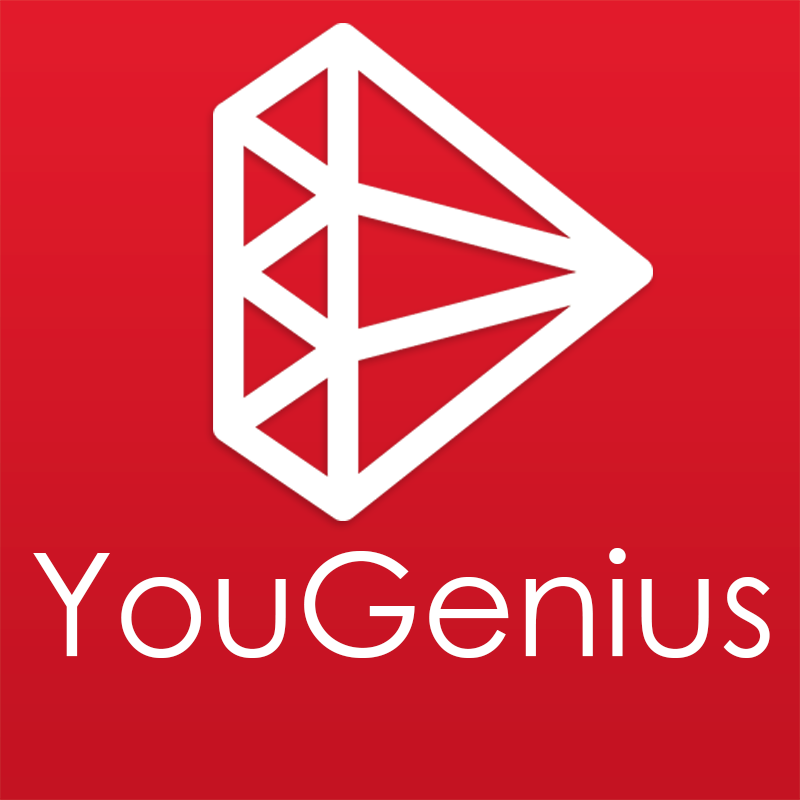
<style>
.page{position:relative;width:800px;height:800px}
.page>*{position:absolute;margin:0}
.t1{font:144px "CenturyGothic";color:#ffffff}
</style>
<div class="page">
<p class="t1" style="left:33px;top:548px;width:737px;height:110px">YouGenius</p>
</div>
